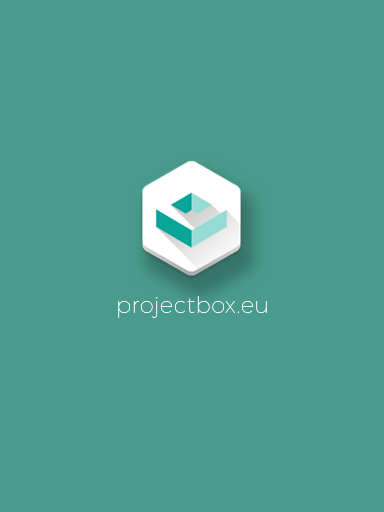
<style>
.page{position:relative;width:384px;height:512px;background:#499b8d}
.page>*{position:absolute;margin:0}
.t1{font:22.8px "Montserrat-Thin";letter-spacing:0.025em;color:#f8f8f8}
</style>
<div class="page">
<p class="t1" style="left:118px;top:296px;width:149px;height:22px">projectbox.eu</p>
</div>
